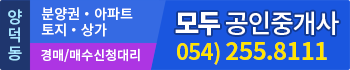
<style>
.page{position:relative;width:350px;height:70px;background:#1a56df}
.page>*{position:absolute;margin:0}
.t1{font:16px/18px "NotoSansCJKkr-Medium";color:#a6e5ff}
.t2{font:14px/16px "NotoSansCJKkr-Medium";color:#ffffff}
.t3{font:26px "NotoSansCJKkr-Medium";letter-spacing:-0.05em;color:#ffffff}
.t4{font:26px "NotoSansCJKkr-Black";letter-spacing:-0.05em;color:#ffffff}
.t5{font:13px "NotoSansCJKkr-Medium";color:#ffffff}
.t6{font:24px "NotoSansCJKkr-Bold";letter-spacing:-0.025em;color:#ffe400}
.t7{font:22px "NotoSansCJKkr-Bold";letter-spacing:-0.025em;color:#ffe400}
</style>
<div class="page">
<p class="t1" style="left:8px;top:9px;width:14px;height:52px">양<br>덕<br>동</p>
<p class="t2" style="left:41px;top:7px;width:92px;height:30px">분양권・아파트 <br>토지・상가</p>
<p class="t3" style="left:175px;top:11px;width:164px;height:25px"><span class="t4">모두 </span>공인중개사</p>
<p class="t5" style="left:41px;top:48px;width:99px;height:14px">경매/매수신청대리</p>
<p class="t6" style="left:177px;top:42px;width:150px;height:23px"><span class="t7">054) </span>255.8111</p>
</div>
